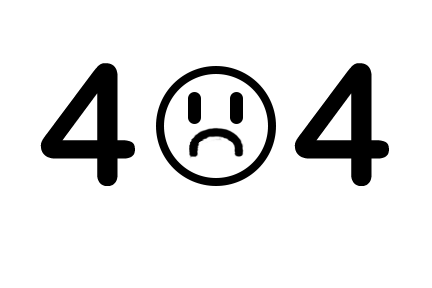
<style>
.page{position:relative;width:432px;height:288px;background:#ffffff}
.page>*{position:absolute;margin:0}
.t1{font:166.5px "ArialRoundedMTBold";color:#000000}
</style>
<div class="page">
<p class="t1" style="left:40px;top:63px;width:95px;height:123px">4</p>
<p class="t1" style="left:294px;top:63px;width:95px;height:123px">4</p>
</div>
